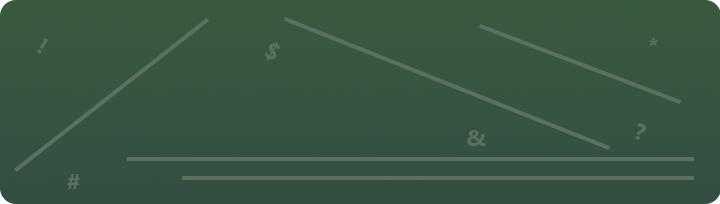
<style>
.page{position:relative;width:720px;height:204px}
.page>*{position:absolute;margin:0}
.t1{font:23px "SegoeUI-Bold";color:#5a715f}
</style>
<div class="page">
<p class="t1" style="left:37px;top:38px;width:11px;height:16px;rotate:30deg">!</p>
<p class="t1" style="left:649px;top:38px;width:9px;height:8px">*</p>
<p class="t1" style="left:264px;top:42px;width:16px;height:19px;rotate:29deg">$</p>
<p class="t1" style="left:635px;top:123px;width:11px;height:17px;rotate:18deg">?</p>
<p class="t1" style="left:467px;top:130px;width:19px;height:16px">&amp;</p>
<p class="t1" style="left:67px;top:174px;width:13px;height:15px">#</p>
</div>
